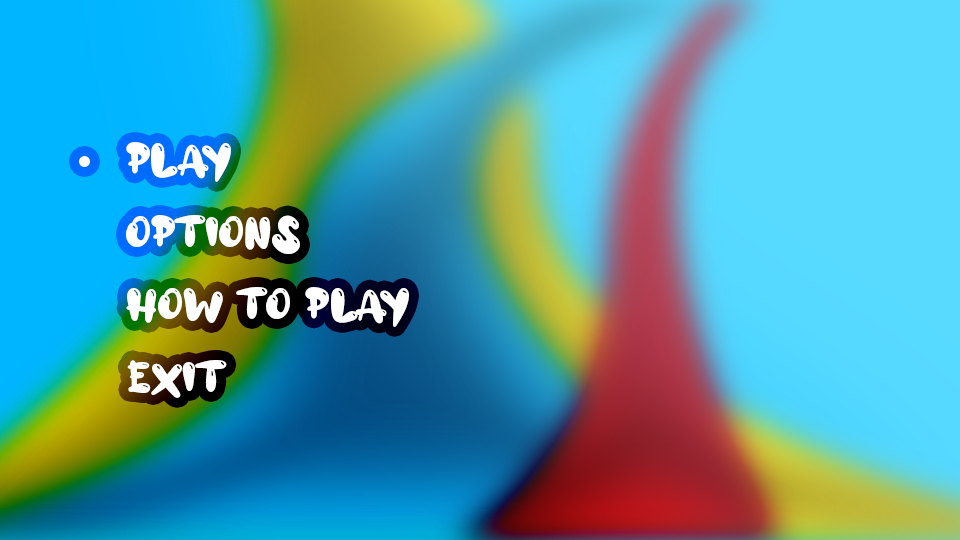
<style>
.page{position:relative;width:960px;height:540px}
.page>*{position:absolute;margin:0}
.t1{font:42.3px "aAlloyInk";color:#ffffff;text-transform:uppercase}
.t2{font:42.3px "aAlloyInk";letter-spacing:0.04em;color:#ffffff;text-transform:uppercase}
</style>
<div class="page">
<p class="t1" style="left:126px;top:142px;width:105px;height:40px">P<span class="t2">l</span>ay</p>
<p class="t1" style="left:126px;top:215px;width:174px;height:39px">Options</p>
<p class="t1" style="left:126px;top:287px;width:283px;height:40px">How to play</p>
<p class="t1" style="left:127px;top:360px;width:100px;height:38px">Exit</p>
</div>
